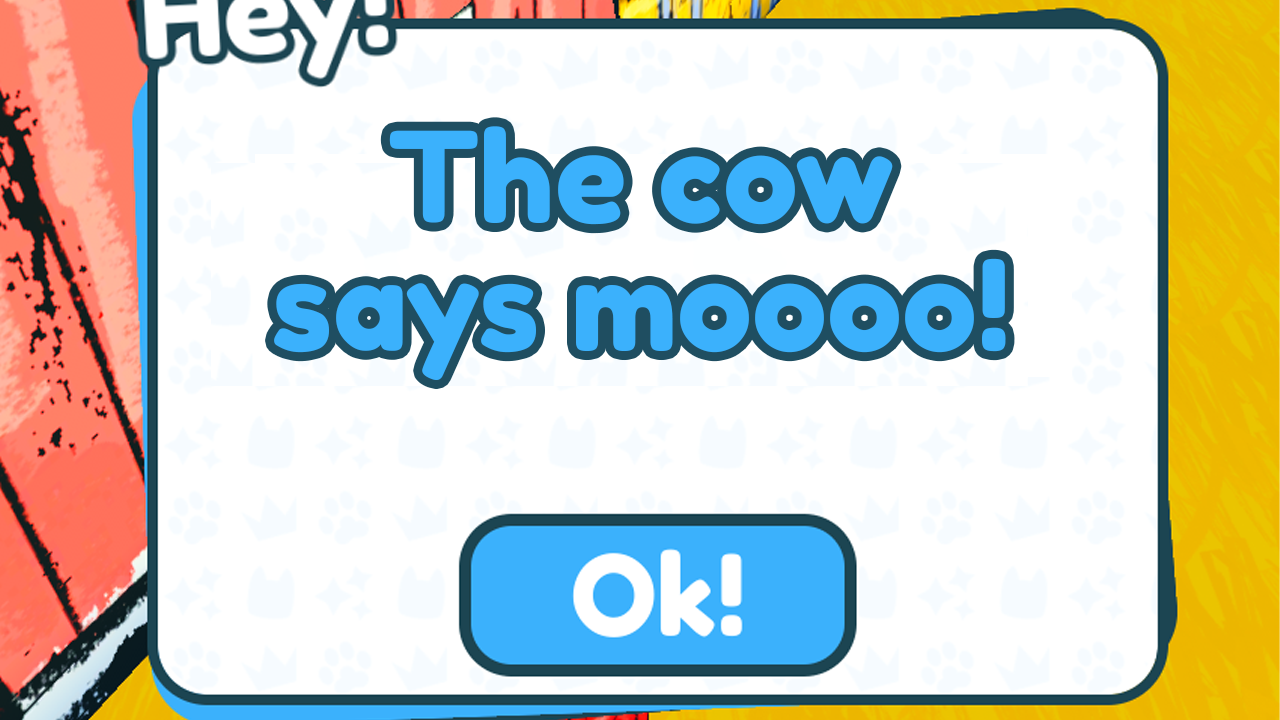
<style>
.page{position:relative;width:1280px;height:720px;background:#ffffff}
.page>*{position:absolute;margin:0}
.t1{font:125.1px/127.1px "FredokaOne-Regular";color:#3bb1fc}
</style>
<div class="page">
<p class="t1" style="left:274px;top:126px;width:732px;height:254px;text-align:center">The cow<br>says moooo!</p>
</div>
